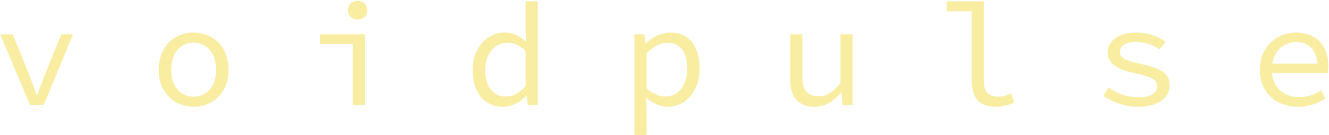
<style>
.page{position:relative;width:1329px;height:135px;background:#ffffff}
.page>*{position:absolute;margin:0}
.t1{font:145.4px "SourceCodeVariable-Roman";letter-spacing:0.48em;color:#f9eea2}
</style>
<div class="page">
<p class="t1" style="left:0px;top:0px;width:1329px;height:135px">voidpulse</p>
</div>
